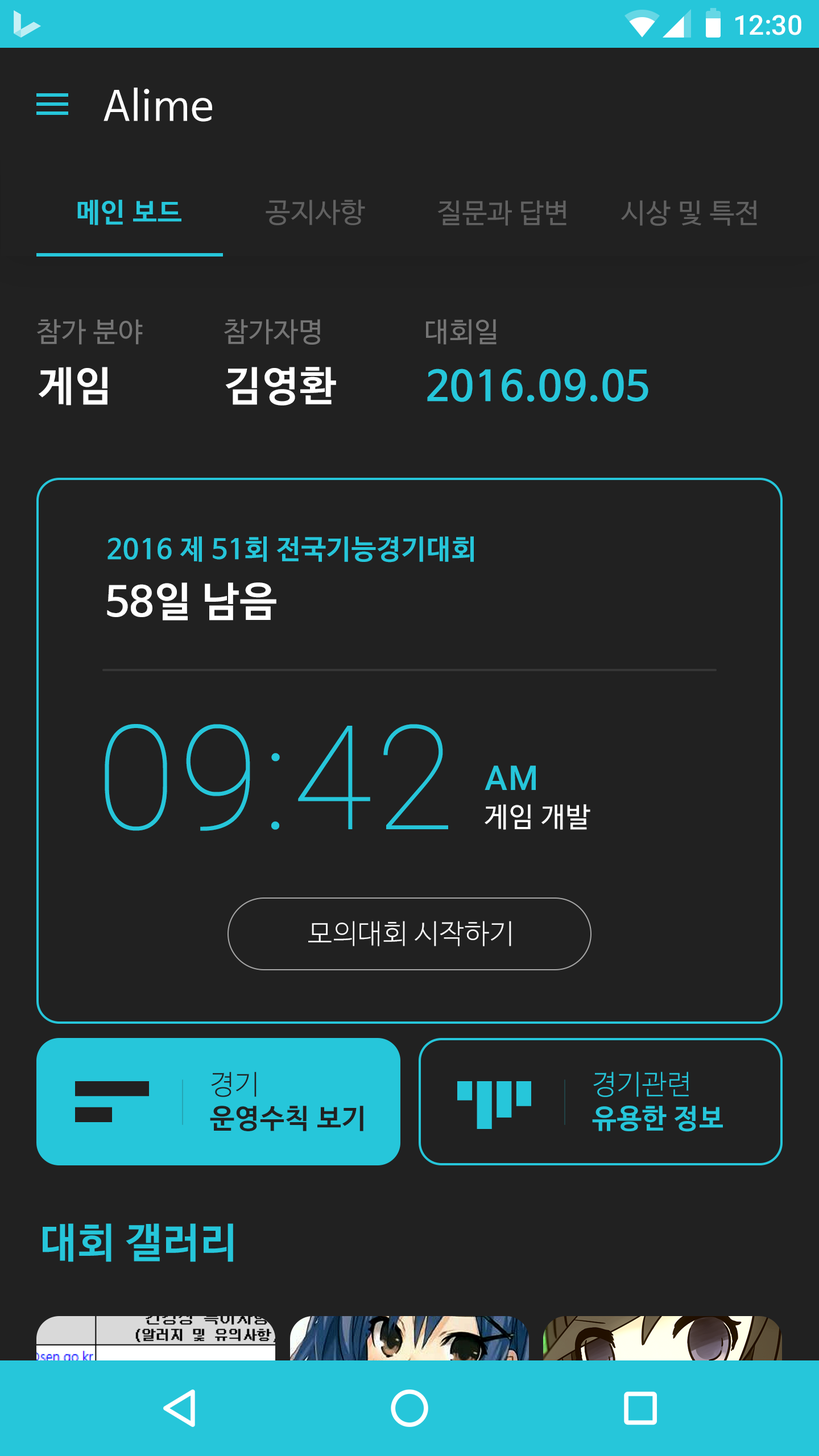
<style>
.page{position:relative;width:819px;height:1456px;background:#212121}
.page>*{position:absolute;margin:0}
.t1{font:27.3px "Roboto-Medium";color:#ffffff}
.t2{font:40.9px "NanumBarunGothic";letter-spacing:0.025em;color:#ffffff}
.t3{font:27.3px "NanumBarunGothicBold";letter-spacing:0.025em;color:#26c6da}
.t4{font:27.3px "NanumBarunGothic";letter-spacing:0.025em;color:#616161}
.t5{font:27.3px "NanumBarunGothic";letter-spacing:0.025em;color:#757575}
.t6{font:40.9px "NanumBarunGothicBold";letter-spacing:0.025em;color:#ffffff}
.t7{font:40.9px "NanumBarunGothicBold";letter-spacing:0.025em;color:#26c6da}
.t8{font:145.6px "Roboto-Thin";letter-spacing:0.025em;color:#26c6da}
.t9{font:34.1px "Roboto-Medium";letter-spacing:0.025em;color:#26c6da}
.t10{font:27.3px "NanumBarunGothic";letter-spacing:0.025em;color:#ffffff}
.t11{font:27.3px "NanumBarunGothicLight";letter-spacing:0.025em;color:#fafafa}
.t12{font:27.3px/34.1px "NanumBarunGothicBold";letter-spacing:0.025em;color:#212121}
.t13{font:27.3px/34.1px "NanumBarunGothicLight";letter-spacing:0.025em;color:#212121}
.t14{font:27.3px/34.1px "NanumBarunGothicBold";letter-spacing:0.025em;color:#26c6da}
.t15{font:27.3px/34.1px "NanumBarunGothicLight";letter-spacing:0.025em;color:#26c6da}
</style>
<div class="page">
<p class="t1" style="left:735px;top:15px;width:66px;height:20px">12:30</p>
<p class="t2" style="left:104px;top:88px;width:108px;height:34px">Alime</p>
<p class="t3" style="left:77px;top:200px;width:104px;height:25px">메인 보드</p>
<p class="t4" style="left:266px;top:200px;width:99px;height:25px">공지사항</p>
<p class="t4" style="left:437px;top:200px;width:129px;height:26px">질문과 답변</p>
<p class="t4" style="left:621px;top:200px;width:136px;height:26px">시상 및 특전</p>
<p class="t5" style="left:37px;top:319px;width:106px;height:26px">참가 분야</p>
<p class="t5" style="left:224px;top:319px;width:96px;height:26px">참가자명</p>
<p class="t5" style="left:426px;top:319px;width:71px;height:26px">대회일</p>
<p class="t6" style="left:39px;top:367px;width:68px;height:39px">게임</p>
<p class="t6" style="left:225px;top:367px;width:111px;height:39px">김영환</p>
<p class="t7" style="left:427px;top:369px;width:221px;height:33px">2016.09.05</p>
<p class="t3" style="left:107px;top:536px;width:367px;height:26px">2016 제 51회 전국기능경기대회</p>
<p class="t6" style="left:107px;top:582px;width:169px;height:38px">58일 남음</p>
<p class="t8" style="left:105px;top:724px;width:343px;height:107px">09:42</p>
<p class="t9" style="left:485px;top:766px;width:51px;height:24px">AM</p>
<p class="t10" style="left:485px;top:804px;width:105px;height:26px">게임 개발</p>
<p class="t11" style="left:308px;top:921px;width:203px;height:25px">모의대회 시작하기</p>
<p class="t12" style="left:210px;top:1072px;width:153px;height:59px"><span class="t13">경기 <br></span>운영수칙 보기</p>
<p class="t14" style="left:592px;top:1072px;width:131px;height:60px"><span class="t15">경기관련 <br></span>유용한 정보</p>
<p class="t7" style="left:43px;top:1223px;width:190px;height:39px">대회 갤러리</p>
</div>
